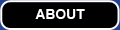
<style>
.page{position:relative;width:120px;height:30px;background:#000000}
.page>*{position:absolute;margin:0}
.t1{font:14px "Helvetica-Bold";color:#ffffff}
</style>
<div class="page">
<p class="t1" style="left:35px;top:9px;width:50px;height:10px">ABOUT</p>
</div>
